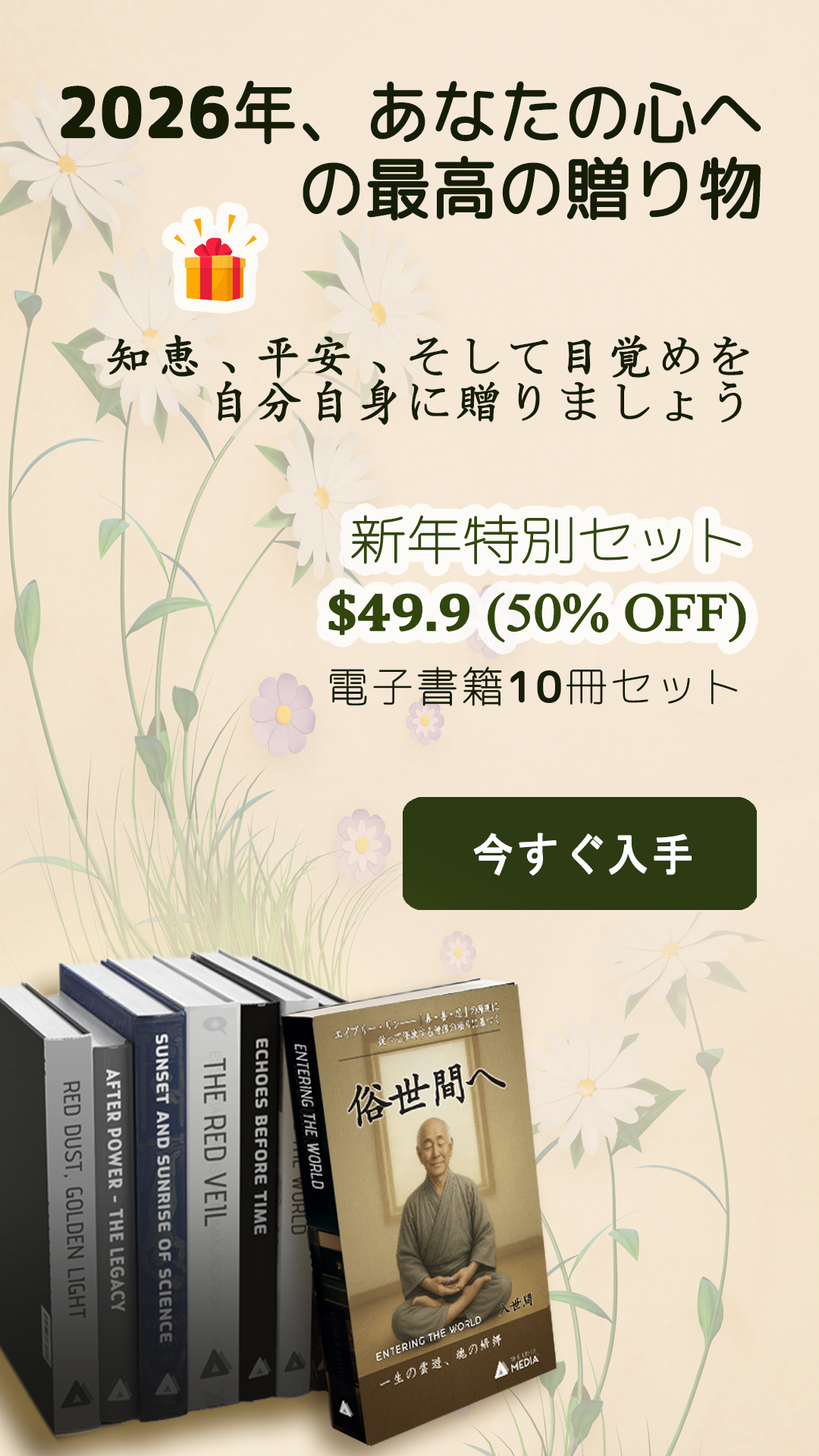
<style>
.page{position:relative;width:819px;height:1456px}
.page>*{position:absolute;margin:0}
.t1{font:68.2px/76px "RoundedMplus1c-Regular";color:#151e05;font-weight:bold;scale:0.95 1}
.t2{font:68.2px/76px "RoundedMplus1c-ExtraBold";color:#151e05;font-weight:bold;scale:0.95 1}
.t3{font:45.5px/45.5px "CN-Khai3.0";letter-spacing:0.075em;color:#151e05;font-weight:bold}
.t4{font:53.2px/71px "TimesNewRomanPSMT";letter-spacing:-0.025em;color:#31460c;font-weight:bold;scale:1.07 1}
.t5{font:53.2px/71px "RoundedMplus1c-Thin";letter-spacing:-0.025em;color:#31460c;font-weight:bold;scale:1.07 1}
.t6{font:53.2px/71px "Cambria-Bold";letter-spacing:-0.025em;color:#31460c;font-weight:bold;scale:1.07 1}
.t7{font:41.7px "RoundedMplus1c-Thin";letter-spacing:0.05em;color:#151e05;font-weight:bold}
.t8{font:41.7px "RoundedMplus1c-Medium";letter-spacing:0.05em;color:#151e05;font-weight:bold}
.t9{font:45.9px "MS-Gothic";letter-spacing:0.05em;color:#ffffff;font-weight:bold;scale:0.91 1}
</style>
<div class="page">
<p class="t1" style="left:61px;top:80px;width:700px;height:141px;text-align:right"><span class="t2">2026</span>年、あなたの心へ<br>の最高の贈り物</p>
<p class="t3" style="left:107px;top:334px;width:642px;height:91px;text-align:right">知恵、平安、そして目覚めを<br>自分自身に贈りましょう</p>
<p class="t4" style="left:328px;top:515px;width:418px;height:128px;text-align:right"><span class="t5">新年特別セット<br> </span><span class="t6">$49.9</span> (50% OFF)</p>
<p class="t7" style="left:330px;top:667px;width:408px;height:39px">電子書籍<span class="t8">10</span>冊セット</p>
<p class="t9" style="left:473px;top:833px;width:219px;height:43px">今すぐ入手</p>
</div>
